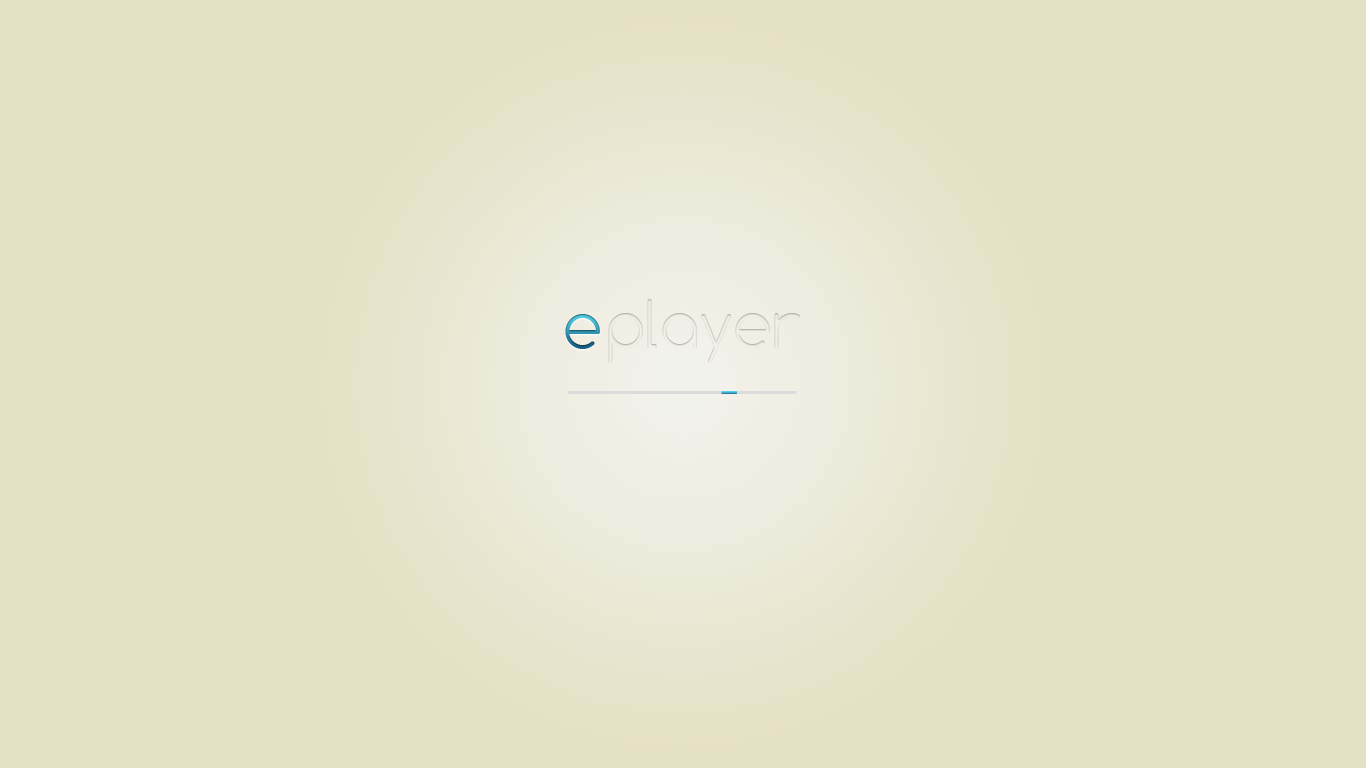
<style>
.page{position:relative;width:1366px;height:768px;background:#e3e2c4}
.page>*{position:absolute;margin:0}
.t1{font:62.5px "Comfortaa-Light";color:#ece9e1}
.t2{font:62.5px "Comfortaa-Light"}
</style>
<div class="page">
<p class="t1" style="left:608px;top:299px;width:192px;height:64px">player</p>
<p class="t2" style="left:565px;top:314px;width:35px;height:35px">e</p>
</div>
